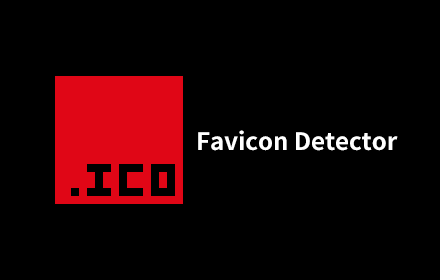
<style>
.page{position:relative;width:440px;height:280px;background:#000000}
.page>*{position:absolute;margin:0}
.t1{font:24px "NotoSansCJKsc-Bold";color:#ffffff}
</style>
<div class="page">
<p class="t1" style="left:198px;top:130px;width:200px;height:21px">Favicon Detector</p>
</div>
